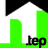
<style>
.page{position:relative;width:48px;height:48px;background:#ffffff}
.page>*{position:absolute;margin:0}
.t1{font:14px "Harabara-Bold";color:#000000;font-weight:bold}
</style>
<div class="page">
<p class="t1" style="left:26px;top:35px;width:21px;height:13px">.tep</p>
</div>
